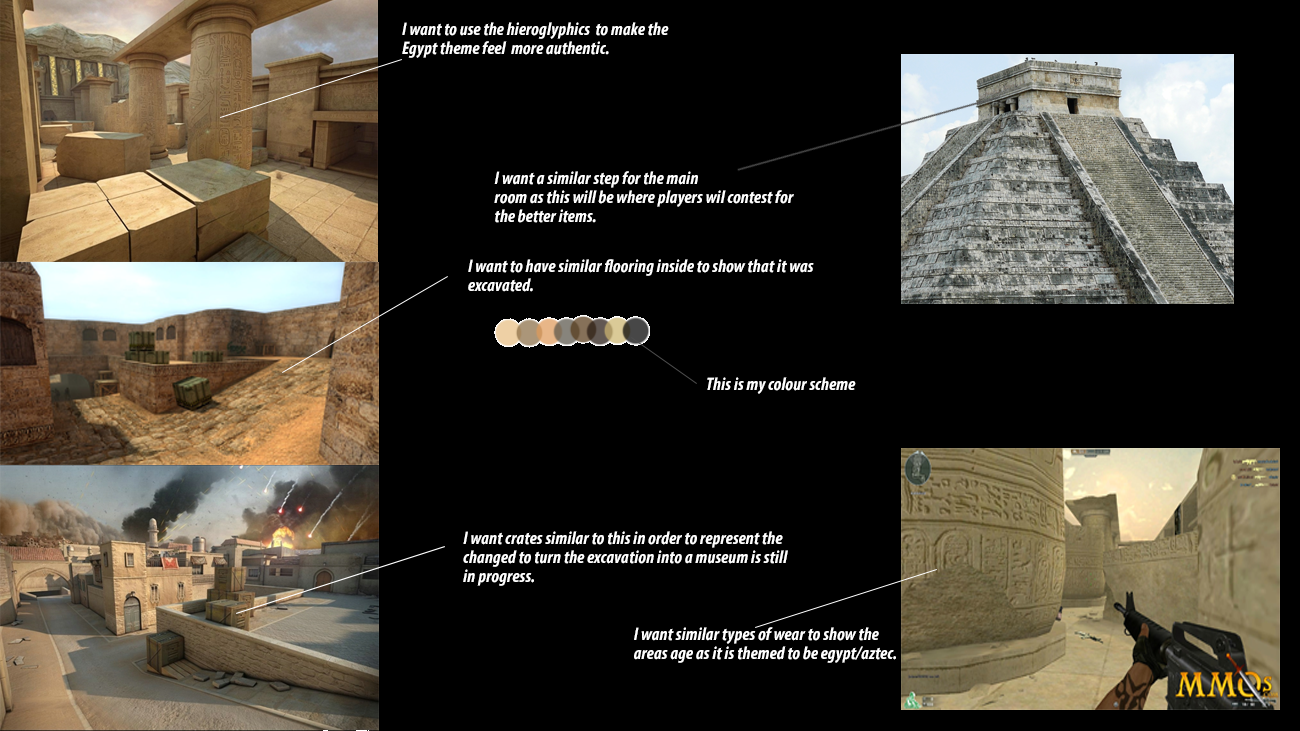
<style>
.page{position:relative;width:1300px;height:731px;background:#000000}
.page>*{position:absolute;margin:0}
.t1{font:18px/19px "MyriadPro-BoldCondIt";letter-spacing:0.01em;color:#ffffff}
.t2{font:18px "MyriadPro-BoldCondIt";letter-spacing:0.01em;color:#ffffff}
</style>
<div class="page">
<p class="t1" style="left:402px;top:22px;width:267px;height:36px">I want to use the hieroglyphics  to make the<br>Egypt theme feel  more authentic.</p>
<p class="t1" style="left:494px;top:171px;width:300px;height:52px">I want a similar step for the main <br>room as this will be where players wil contest for<br>the better items.</p>
<p class="t1" style="left:468px;top:259px;width:346px;height:33px">I want to have similar flooring inside to show that it was <br>excavated.</p>
<p class="t2" style="left:707px;top:377px;width:149px;height:17px">This is my colour scheme</p>
<p class="t1" style="left:463px;top:531px;width:325px;height:55px">I want crates similar to this in order to represent the<br>changed to turn the excavation into a museum is still<br>in progress.</p>
<p class="t1" style="left:634px;top:627px;width:262px;height:36px">I want similar types of wear to show the<br>areas age as it is themed to be egypt/aztec.</p>
</div>
